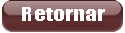
<style>
.page{position:relative;width:125px;height:33px;background:#ffffff}
.page>*{position:absolute;margin:0}
.t1{font:17.9px "Impact";color:#ffffff;scale:1.3 1}
</style>
<div class="page">
<p class="t1" style="left:22px;top:7px;width:83px;height:14px">Retornar</p>
</div>
